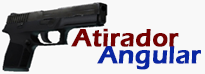
<style>
.page{position:relative;width:205px;height:74px;background:#f8f8f8}
.page>*{position:absolute;margin:0}
.t1{font:25.4px "ErasITC-Demi";color:#740101;font-weight:bold}
.t2{font:25.4px "ErasITC-Demi";color:#0926a2;font-weight:bold}
</style>
<div class="page">
<p class="t1" style="left:71px;top:28px;width:108px;height:19px">Atirador</p>
<p class="t2" style="left:97px;top:46px;width:104px;height:24px">Angular</p>
</div>
